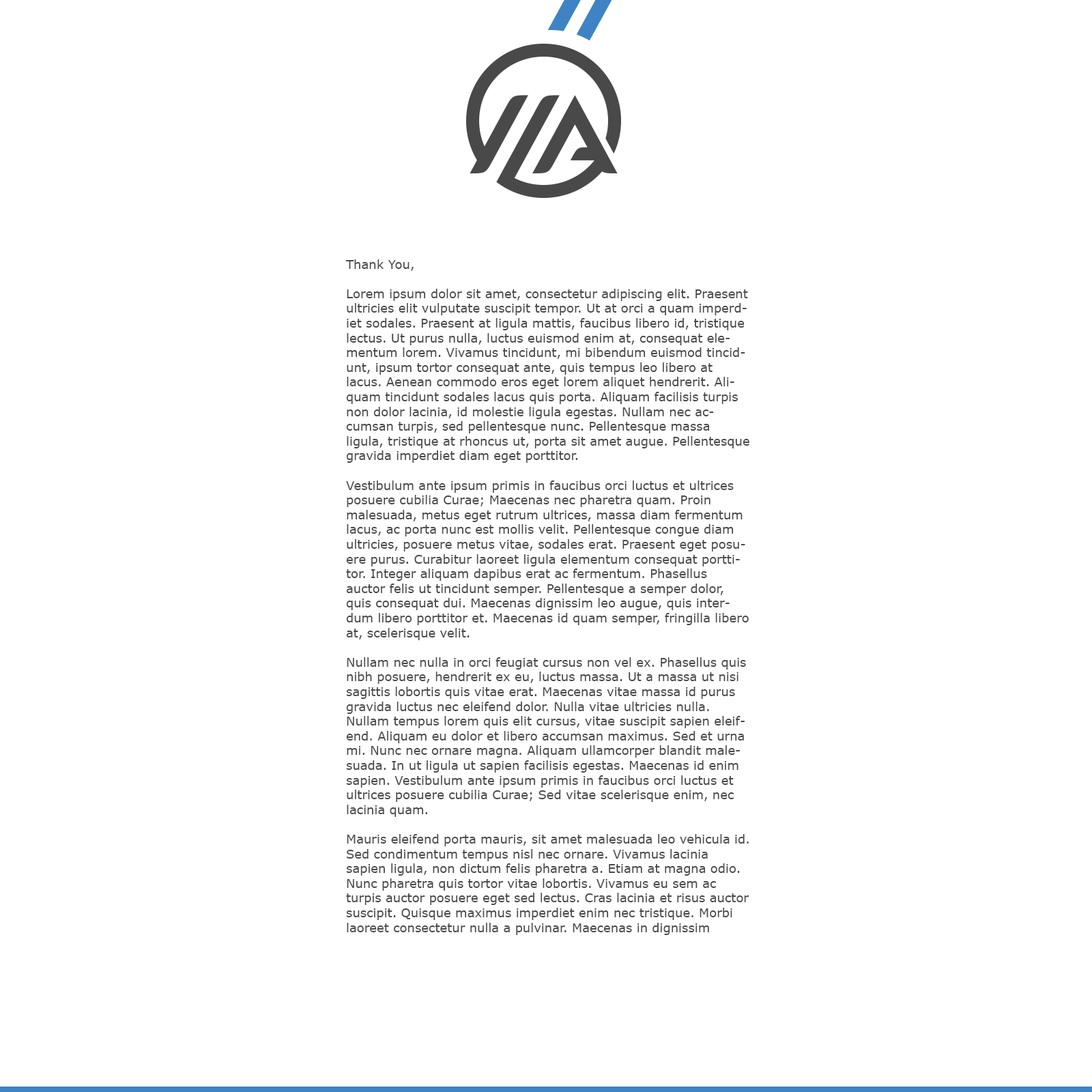
<style>
.page{position:relative;width:1092px;height:1092px;background:#ffffff}
.page>*{position:absolute;margin:0}
.t1{font:12.3px "Verdana";color:#494949}
</style>
<div class="page">
<p class="t1" style="left:345px;top:259px;width:404px;height:676px">Thank You,<br><br>Lorem ipsum dolor sit amet, consectetur adipiscing elit. Praesent ultricies elit vulputate suscipit tempor. Ut at orci a quam imperdiet sodales. Praesent at ligula mattis, faucibus libero id, tristique lectus. Ut purus nulla, luctus euismod enim at, consequat elementum lorem. Vivamus tincidunt, mi bibendum euismod tincidunt, ipsum tortor consequat ante, quis tempus leo libero at lacus. Aenean commodo eros eget lorem aliquet hendrerit. Aliquam tincidunt sodales lacus quis porta. Aliquam facilisis turpis non dolor lacinia, id molestie ligula egestas. Nullam nec accumsan turpis, sed pellentesque nunc. Pellentesque massa ligula, tristique at rhoncus ut, porta sit amet augue. Pellentesque gravida imperdiet diam eget porttitor.<br><br>Vestibulum ante ipsum primis in faucibus orci luctus et ultrices posuere cubilia Curae; Maecenas nec pharetra quam. Proin malesuada, metus eget rutrum ultrices, massa diam fermentum lacus, ac porta nunc est mollis velit. Pellentesque congue diam ultricies, posuere metus vitae, sodales erat. Praesent eget posuere purus. Curabitur laoreet ligula elementum consequat porttitor. Integer aliquam dapibus erat ac fermentum. Phasellus auctor felis ut tincidunt semper. Pellentesque a semper dolor, quis consequat dui. Maecenas dignissim leo augue, quis interdum libero porttitor et. Maecenas id quam semper, fringilla libero at, scelerisque velit.<br><br>Nullam nec nulla in orci feugiat cursus non vel ex. Phasellus quis nibh posuere, hendrerit ex eu, luctus massa. Ut a massa ut nisi sagittis lobortis quis vitae erat. Maecenas vitae massa id purus gravida luctus nec eleifend dolor. Nulla vitae ultricies nulla. Nullam tempus lorem quis elit cursus, vitae suscipit sapien eleifend. Aliquam eu dolor et libero accumsan maximus. Sed et urna mi. Nunc nec ornare magna. Aliquam ullamcorper blandit malesuada. In ut ligula ut sapien facilisis egestas. Maecenas id enim sapien. Vestibulum ante ipsum primis in faucibus orci luctus et ultrices posuere cubilia Curae; Sed vitae scelerisque enim, nec lacinia quam.<br><br>Mauris eleifend porta mauris, sit amet malesuada leo vehicula id. Sed condimentum tempus nisl nec ornare. Vivamus lacinia sapien ligula, non dictum felis pharetra a. Etiam at magna odio. Nunc pharetra quis tortor vitae lobortis. Vivamus eu sem ac turpis auctor posuere eget sed lectus. Cras lacinia et risus auctor suscipit. Quisque maximus imperdiet enim nec tristique. Morbi laoreet consectetur nulla a pulvinar. Maecenas in dignissim ipsum, nec imperdiet odio. Vestibulum sollicitudin maximus interdum. Donec metus mi, porta a mi sed, laoreet interdum urna. Donec quis dapibus quam, eget porttitor justo.<br><br>Curabitur dictum dictum libero sit amet facilisis. Praesent sagittis egestas eros, sit amet tristique arcu ultrices quis. In accumsan dui erat, eget ultricies neque imperdiet et. Praesent consectetur id felis quis auctor. Pellentesque feugiat sem urna, eu faucibus metus tristique vel. Mauris mattis quam ut lorem cursus, non luctus justo finibus. Sed convallis, libero ac consectetur eleifend, ante nulla fringilla nibh, a fringilla diam dolor ut felis. Integer ultrices metus sit amet varius ultricies. Ut scelerisque est at elit facilisis, et egestas libero ornare.</p>
</div>
